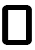
<style>
.page{position:relative;width:35px;height:50px;background:#ffffff}
.page>*{position:absolute;margin:0}
.t1{font:61.9px "OCRAExtended";color:#000000;scale:1.16 1}
</style>
<div class="page">
<p class="t1" style="left:2px;top:5px;width:30px;height:40px">0</p>
</div>
